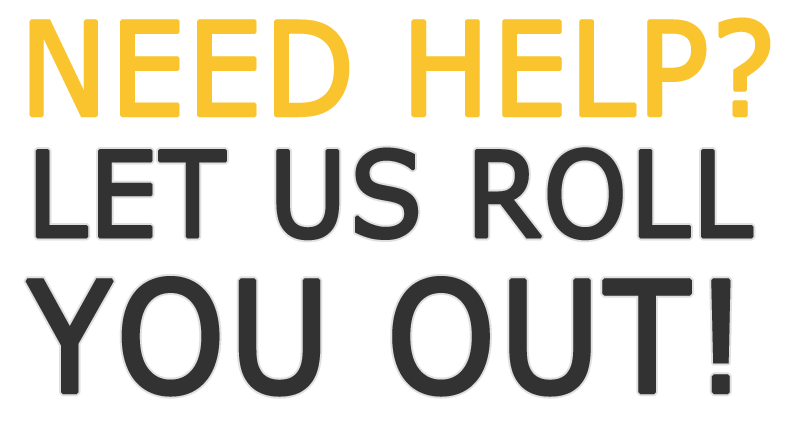
<style>
.page{position:relative;width:802px;height:428px;background:#ffffff}
.page>*{position:absolute;margin:0}
.t1{font:129.6px "MSReferenceSansSerif";color:#f9c42e;font-variant:small-caps;font-weight:bold;scale:0.9 1}
.t2{font:118.5px/139.4px "MSReferenceSansSerif";color:#323232;font-variant:small-caps;font-weight:bold;scale:0.9 1}
.t3{font:153.8px/155.4px "MSReferenceSansSerif";color:#323232;font-variant:small-caps;font-weight:bold;scale:0.9 1}
</style>
<div class="page">
<p class="t1" style="left:29px;top:17px;width:742px;height:101px">NEED HELP?</p>
<p class="t2" style="left:25px;top:147px;width:729px;height:250px">LET US ROLL<br><span class="t3">YOU OUT!</span></p>
</div>
